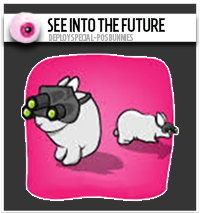
<style>
.page{position:relative;width:200px;height:213px;background:#353535}
.page>*{position:absolute;margin:0}
.t1{font:19px "HomenajeMod-Bold";color:#000101;scale:0.87 1}
.t2{font:9.5px "HomenajeMod-Bold";color:#afafaf;scale:0.87 1}
</style>
<div class="page">
<p class="t1" style="left:47px;top:18px;width:118px;height:14px">SEE INTO THE FUTURE</p>
<p class="t2" style="left:49px;top:34px;width:84px;height:7px">DEPLOY SPECIAL-POS BUNNIES</p>
</div>
